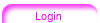
<style>
.page{position:relative;width:100px;height:23px;background:#ffffff}
.page>*{position:absolute;margin:0}
.t1{font:11px "ArialMT";color:#f905f6}
</style>
<div class="page">
<p class="t1" style="left:36px;top:12px;width:25px;height:11px">Login</p>
</div>
